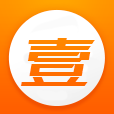
<style>
.page{position:relative;width:114px;height:114px}
.page>*{position:absolute;margin:0}
.t1{font:80.4px "zcool-gdh";color:#ff7a00;font-style:italic}
</style>
<div class="page">
<p class="t1" style="left:20px;top:38px;width:75px;height:48px">壹</p>
</div>
